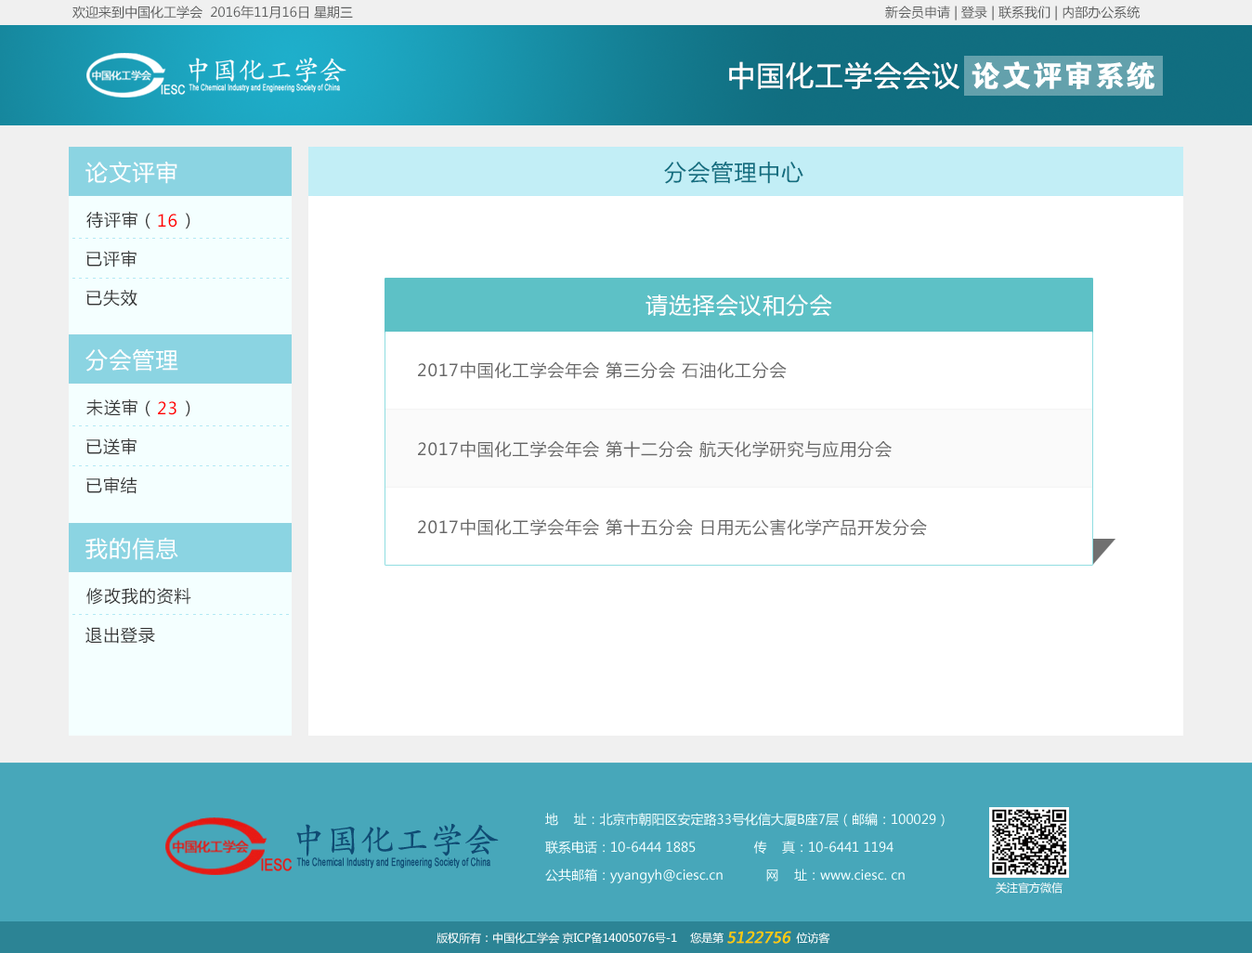
<style>
.page{position:relative;width:1252px;height:953px;background:#ffffff}
.page>*{position:absolute;margin:0}
.t1{font:13px "MicrosoftYaHei";color:#5d5e5e}
.t2{font:27.9px "MicrosoftYaHei";letter-spacing:0.05em;color:#ffffff}
.t3{font:29.6px "FZDHTJW--GB1-0";letter-spacing:0.05em;color:#ffffff}
.t4{font:22.3px "MicrosoftYaHei";letter-spacing:0.05em;color:#ffffff}
.t5{font:22.3px "MicrosoftYaHei";letter-spacing:0.05em;color:#116e80}
.t6{font:16.7px "MicrosoftYaHei";letter-spacing:0.05em;color:#363636}
.t7{font:16.7px "MicrosoftYaHei";letter-spacing:0.05em;color:#ff0000}
.t8{font:7.4px "SimSun";letter-spacing:0.4em;color:#b2e9f4}
.t9{font:16.7px "MicrosoftYaHei";letter-spacing:0.05em;color:#676767}
.t10{font:13px/27.9px "MicrosoftYaHei";color:#f4ffff}
.t11{font:11.1px "MicrosoftYaHei";color:#f4ffff}
.t12{font:14.9px "MicrosoftYaHei";color:#ffcc00;font-weight:bold;font-style:italic}
</style>
<div class="page">
<p class="t1" style="left:72px;top:6px;width:281px;height:13px">欢迎来到中国化工学会  2016年11月16日 星期三</p>
<p class="t1" style="left:885px;top:6px;width:254px;height:14px">新会员申请 | 登录 | 联系我们 | 内部办公系统</p>
<p class="t2" style="left:729px;top:61px;width:230px;height:29px">中国化工学会会议</p>
<p class="t3" style="left:971px;top:61px;width:183px;height:29px">论文评审系统</p>
<p class="t4" style="left:85px;top:161px;width:92px;height:23px">论文评审</p>
<p class="t5" style="left:664px;top:162px;width:139px;height:22px">分会管理中心</p>
<p class="t6" style="left:86px;top:211px;width:104px;height:18px">待评审（    ）</p>
<p class="t7" style="left:158px;top:214px;width:19px;height:13px">16</p>
<p class="t8" style="left:72px;top:238px;width:217px;height:1px">---------------------------------</p>
<p class="t6" style="left:86px;top:250px;width:50px;height:17px">已评审</p>
<p class="t8" style="left:72px;top:278px;width:217px;height:1px">---------------------------------</p>
<p class="t6" style="left:86px;top:290px;width:51px;height:16px">已失效</p>
<p class="t4" style="left:645px;top:294px;width:187px;height:23px">请选择会议和分会</p>
<p class="t4" style="left:85px;top:349px;width:93px;height:22px">分会管理</p>
<p class="t9" style="left:418px;top:361px;width:368px;height:18px">2017中国化工学会年会 第三分会 石油化工分会</p>
<p class="t6" style="left:86px;top:398px;width:104px;height:19px">未送审（    ）</p>
<p class="t7" style="left:158px;top:401px;width:18px;height:14px">23</p>
<p class="t8" style="left:72px;top:425px;width:217px;height:1px">---------------------------------</p>
<p class="t6" style="left:86px;top:437px;width:50px;height:18px">已送审</p>
<p class="t9" style="left:418px;top:440px;width:473px;height:18px">2017中国化工学会年会 第十二分会 航天化学研究与应用分会</p>
<p class="t8" style="left:72px;top:465px;width:217px;height:1px">---------------------------------</p>
<p class="t6" style="left:86px;top:476px;width:51px;height:18px">已审结</p>
<p class="t9" style="left:418px;top:518px;width:509px;height:18px">2017中国化工学会年会 第十五分会 日用无公害化学产品开发分会</p>
<p class="t4" style="left:85px;top:537px;width:93px;height:23px">我的信息</p>
<p class="t6" style="left:86px;top:588px;width:105px;height:16px">修改我的资料</p>
<p class="t8" style="left:72px;top:614px;width:217px;height:1px">---------------------------------</p>
<p class="t6" style="left:85px;top:627px;width:70px;height:16px">退出登录</p>
<p class="t10" style="left:545px;top:812px;width:399px;height:71px">地    址：北京市朝阳区安定路33号化信大厦B座7层（邮编：100029）<br>联系电话：10-6444 1885               传    真：10-6441 1194<br>公共邮箱：yyangyh@ciesc.cn           网    址：www.ciesc. cn</p>
<p class="t11" style="left:995px;top:882px;width:67px;height:11px">关注官方微信</p>
<p class="t11" style="left:436px;top:931px;width:394px;height:12px">版权所有：中国化工学会 京ICP备14005076号-1    您是第                      位访客</p>
<p class="t12" style="left:727px;top:930px;width:64px;height:13px">5122756</p>
</div>
